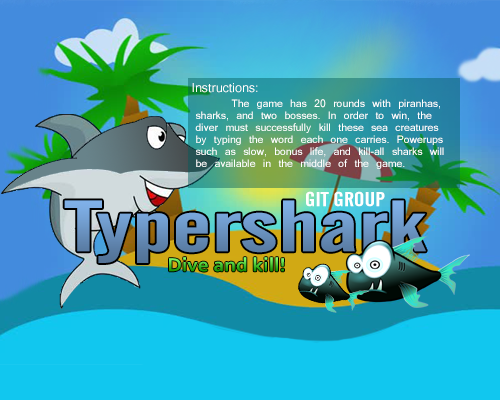
<style>
.page{position:relative;width:500px;height:400px}
.page>*{position:absolute;margin:0}
.t1{font:12px "Kartika";color:#ffffff}
.t2{font:10px "Kartika";color:#ffffff}
.t3{font:8px "Kartika";color:#ffffff}
</style>
<div class="page">
<p class="t1" style="left:192px;top:83px;width:66px;height:10px">Instructions:</p>
<p class="t2" style="left:195px;top:99px;width:249px;height:70px"><span class="t3"> </span>The game has 20 rounds with piranhas, sharks, and two bosses. In order to win, the diver must successfully kill these sea creatures by typing the word each one carries. Powerups such as slow, bonus life, and kill-all sharks will be available in the middle of the game.</p>
</div>
